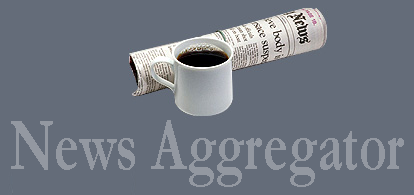
<style>
.page{position:relative;width:414px;height:195px;background:#646c79}
.page>*{position:absolute;margin:0}
.t1{font:75.2px "Garamond-Bold";color:#9398a1;scale:0.71 1}
</style>
<div class="page">
<p class="t1" style="left:11px;top:120px;width:393px;height:67px">News Aggregator</p>
</div>
